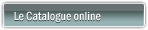
<style>
.page{position:relative;width:148px;height:30px}
.page>*{position:absolute;margin:0}
.t1{font:12px "FranklinGothic-MediumCond";color:#ffffff}
</style>
<div class="page">
<p class="t1" style="left:14px;top:11px;width:87px;height:11px">Le Catalogue online</p>
</div>
